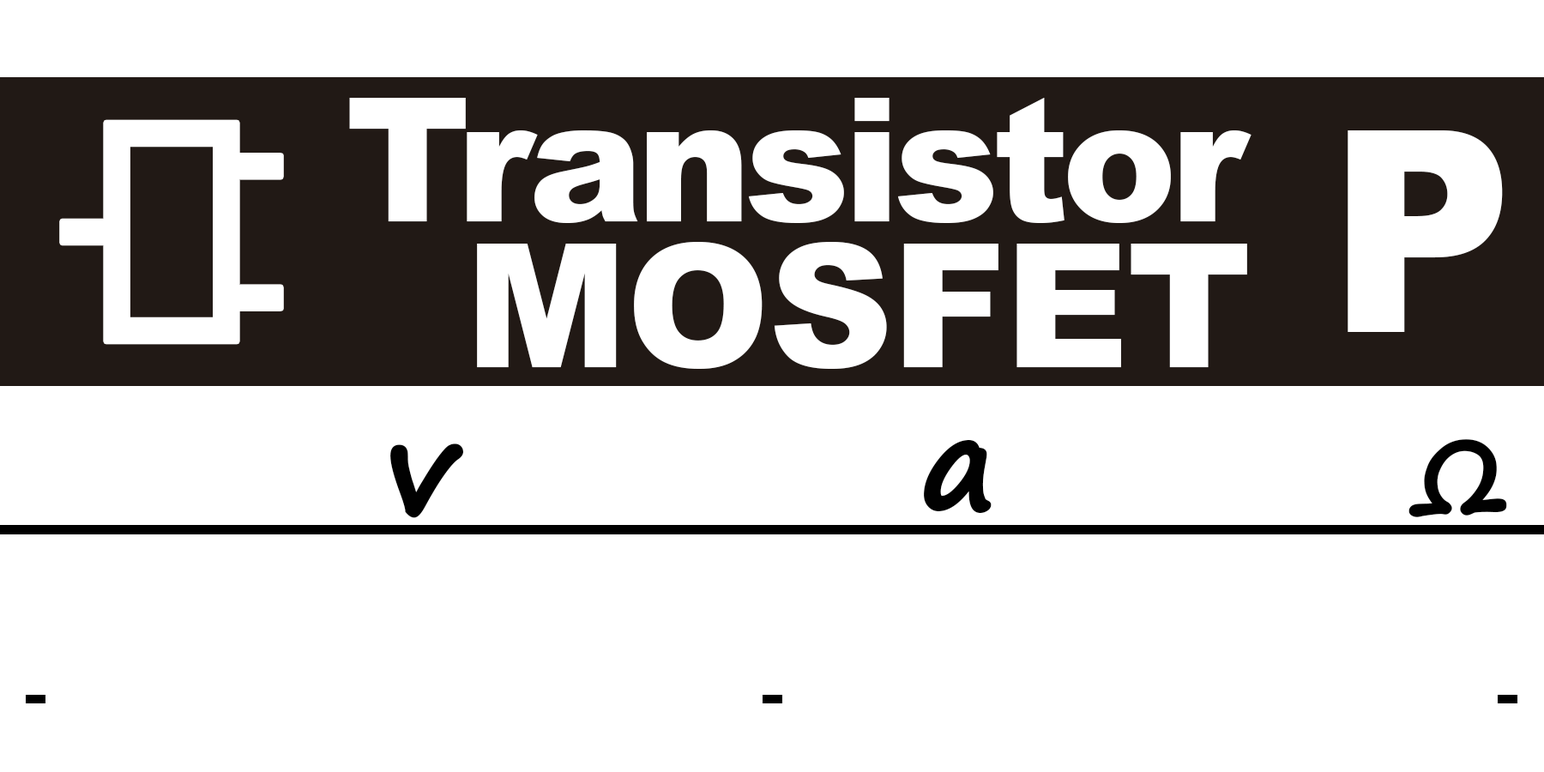
<style>
.page{position:relative;width:1544px;height:772px;background:#ffffff}
.page>*{position:absolute;margin:0}
.t1{font:172.5px/145.3px "Arial-Black";letter-spacing:-0.04em;color:#ffffff}
.t2{font:172.5px/145.3px "Arial-Black";letter-spacing:-0.01em;color:#ffffff}
.t3{font:281.5px "Arial-Black";letter-spacing:-0.01em;color:#ffffff;scale:0.9 1}
.t4{font:127.1px "SegoePrint-Bold";letter-spacing:-0.01em;color:#010101;font-weight:bold}
.t5{font:127.1px "Arial-BoldMT";letter-spacing:-0.01em;color:#010101}
.t6{font:99.9px "SegoePrint-Bold";letter-spacing:-0.01em;color:#010101;font-weight:bold}
</style>
<div class="page">
<p class="t1" style="left:349px;top:98px;width:903px;height:271px;text-align:right">Transistor<br><span class="t2">MOSFET</span></p>
<p class="t3" style="left:1348px;top:130px;width:155px;height:202px">P</p>
<p class="t4" style="left:390px;top:444px;width:74px;height:74px">v</p>
<p class="t4" style="left:924px;top:439px;width:68px;height:75px"><span class="t5">   </span>a</p>
<p class="t6" style="left:1409px;top:439px;width:98px;height:78px"><span class="t5"> </span>Ω</p>
</div>
